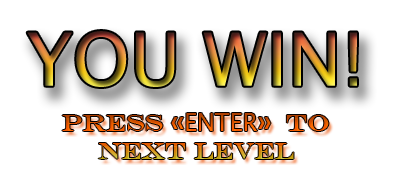
<style>
.page{position:relative;width:400px;height:180px;background:#ffffff}
.page>*{position:absolute;margin:0}
.t1{font:73.3px "LucidaSansUnicode"}
.t2{font:24px "EngraversMT"}
.t3{font:24px "LucidaSans"}
</style>
<div class="page">
<p class="t1" style="left:27px;top:31px;width:330px;height:56px">YOU WIN!</p>
<p class="t2" style="left:62px;top:113px;width:267px;height:46px;text-align:center">Press «<span class="t3">ENTER</span>»  to <br>NeXT LeVEL</p>
</div>
